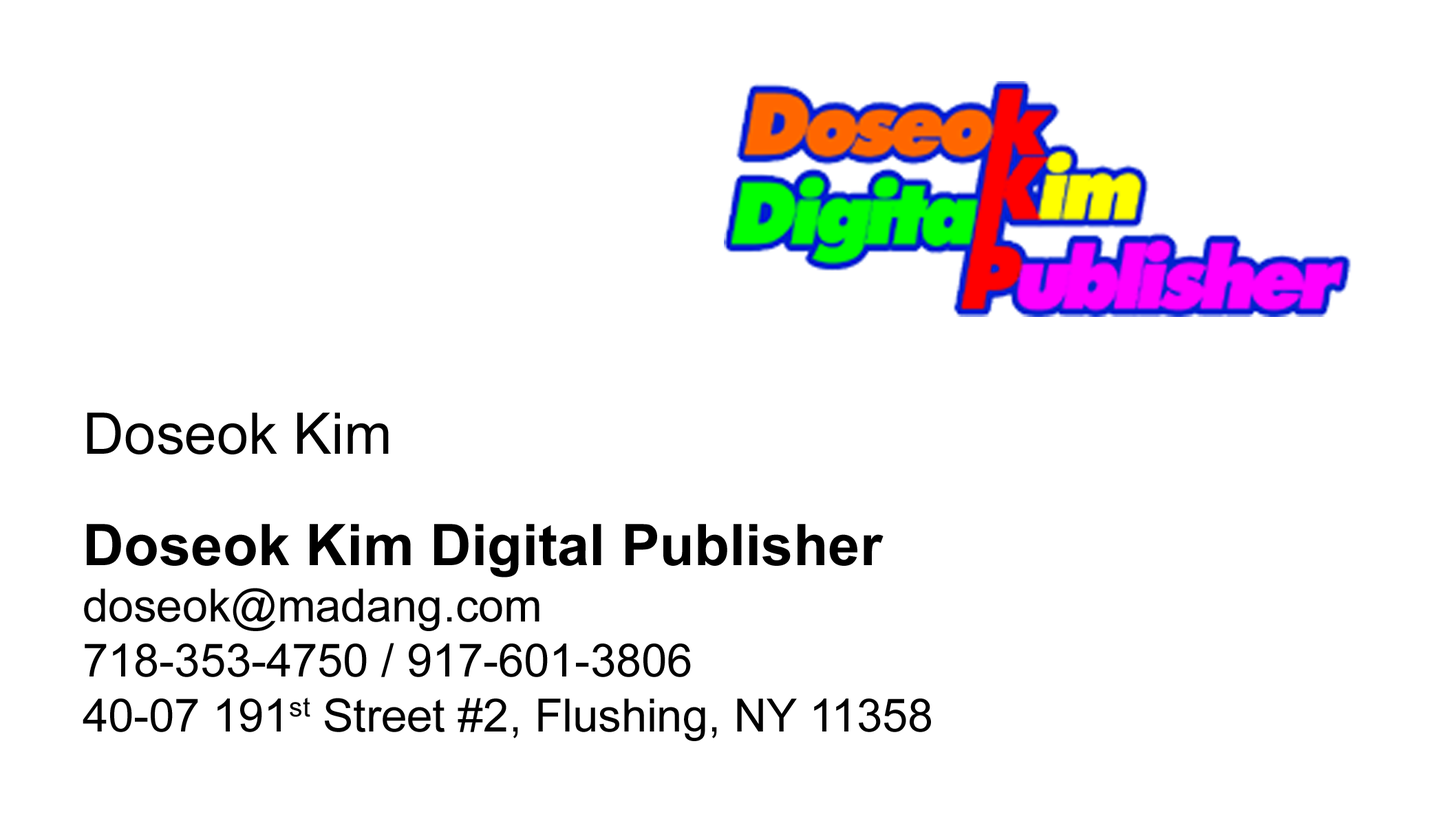
<style>
.page{position:relative;width:1445px;height:825px;background:#ffffff}
.page>*{position:absolute;margin:0}
.t1{font:57.3px "ArialMT";color:#000000}
.t2{font:57.3px "Arial-BoldMT";color:#000000}
.t3{font:45.9px "ArialMT";color:#000000}
</style>
<div class="page">
<p class="t1" style="left:87px;top:413px;width:302px;height:42px">Doseok Kim</p>
<p class="t2" style="left:87px;top:524px;width:796px;height:54px">Doseok Kim Digital Publisher</p>
<p class="t3" style="left:83px;top:588px;width:848px;height:154px">doseok@madang.com<br>718-353-4750 / 917-601-3806<br>40-07 191st Street #2, Flushing, NY 11358</p>
</div>
